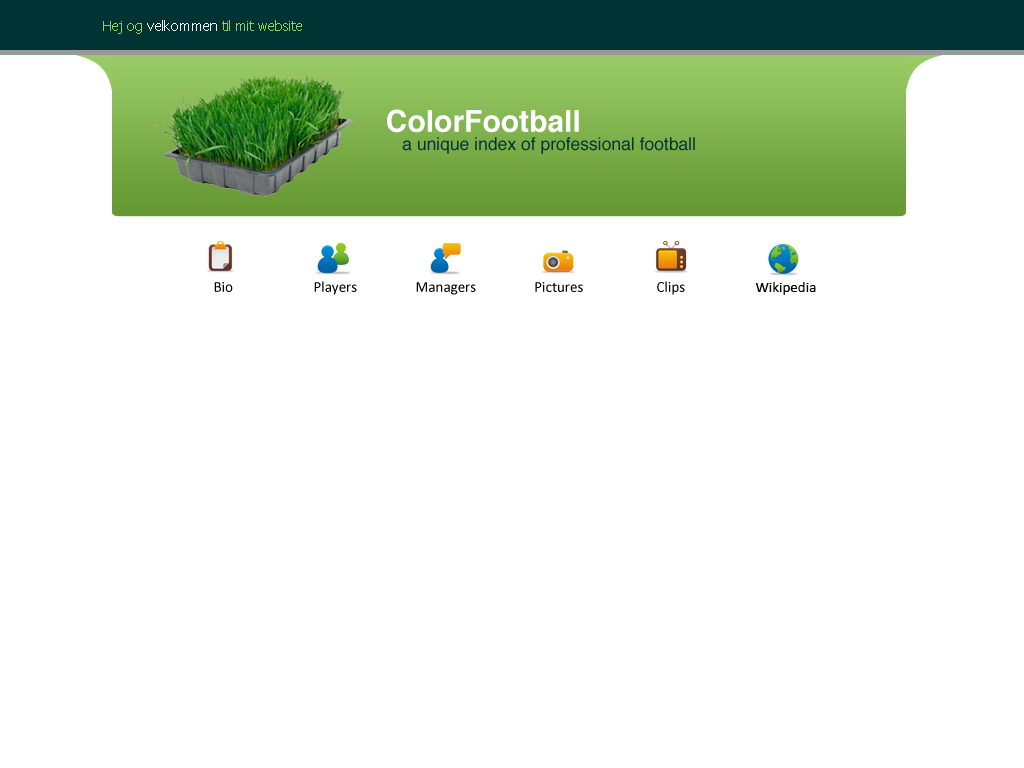
<style>
.page{position:relative;width:1024px;height:768px;background:#ffffff}
.page>*{position:absolute;margin:0}
.t1{font:13.8px "Tahoma";color:#99cc66}
.t2{font:13.8px "Tahoma";color:#ffffff}
.t3{font:30px "Helvetica-Bold";color:#ffffff}
.t4{font:17.5px "Helvetica";color:#003333}
.t5{font:15px "Calibri";color:#000000}
</style>
<div class="page">
<p class="t1" style="left:103px;top:20px;width:199px;height:14px">Hej og <span class="t2">velkommen</span> til mit website</p>
<p class="t3" style="left:387px;top:109px;width:192px;height:24px">ColorFootball</p>
<p class="t4" style="left:402px;top:137px;width:293px;height:17px">a unique index of professional football</p>
<p class="t5" style="left:314px;top:281px;width:43px;height:14px">Players</p>
<p class="t5" style="left:657px;top:281px;width:28px;height:14px">Clips</p>
<p class="t5" style="left:214px;top:282px;width:19px;height:10px">Bio</p>
<p class="t5" style="left:416px;top:282px;width:60px;height:13px">Managers</p>
<p class="t5" style="left:535px;top:282px;width:48px;height:10px">Pictures</p>
<p class="t5" style="left:755px;top:282px;width:61px;height:13px">Wikipedia</p>
</div>
